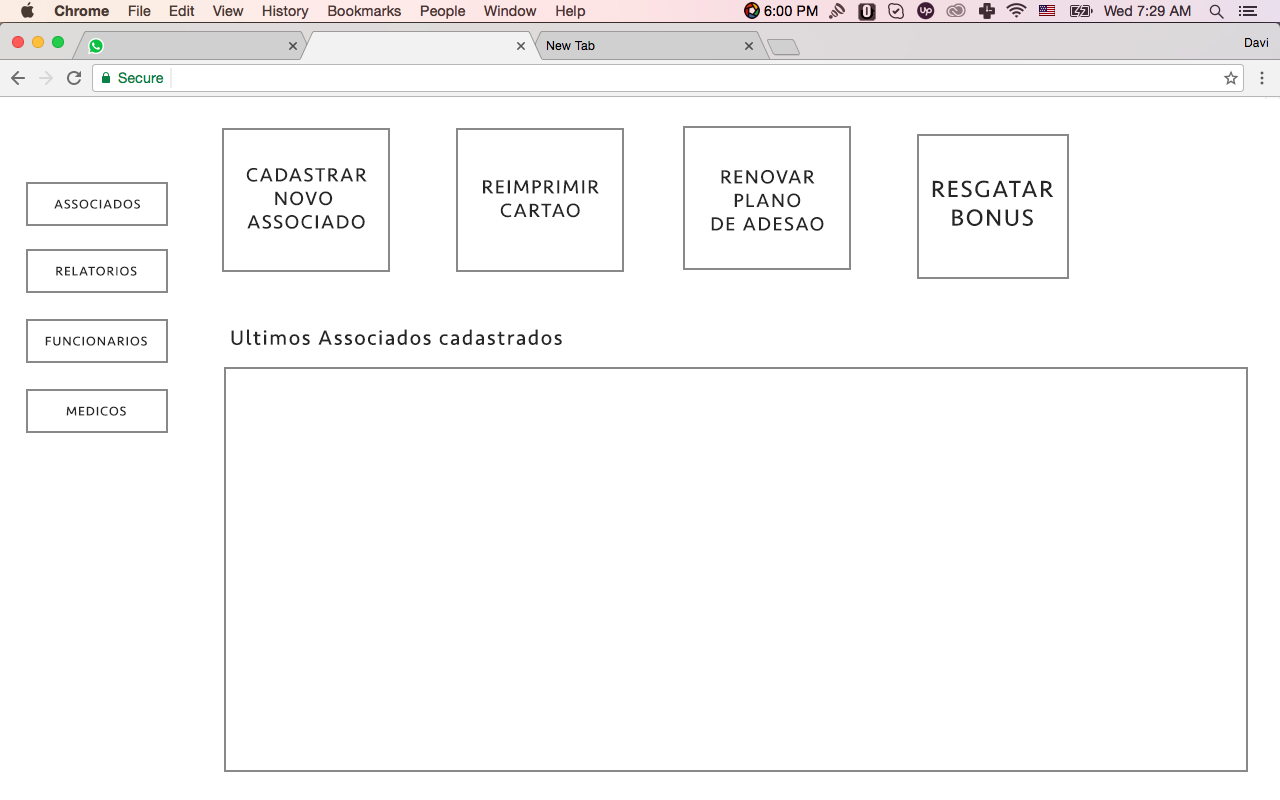
<style>
.page{position:relative;width:1280px;height:800px;background:#ffffff}
.page>*{position:absolute;margin:0}
.t1{font:19.6px "Seravek";letter-spacing:0.075em;color:#262626;text-transform:uppercase}
.t2{font:23.9px "Seravek";letter-spacing:0.075em;color:#262626;text-transform:uppercase}
.t3{font:12.9px "Seravek";letter-spacing:0.075em;color:#262626;text-transform:uppercase}
.t4{font:21.3px "Seravek";letter-spacing:0.075em;color:#262626}
</style>
<div class="page">
<p class="t1" style="left:246px;top:168px;width:121px;height:61px;text-align:center">Cadastrar<br>novo <br>associado</p>
<p class="t1" style="left:711px;top:170px;width:113px;height:61px;text-align:center">renovar<br>plano<br>de adesao</p>
<p class="t1" style="left:483px;top:180px;width:116px;height:38px;text-align:center">reimprimir<br>cartao</p>
<p class="t2" style="left:932px;top:180px;width:122px;height:46px;text-align:center">Resgatar<br>Bonus</p>
<p class="t3" style="left:54px;top:199px;width:86px;height:10px">Associados</p>
<p class="t3" style="left:56px;top:266px;width:81px;height:10px">Relatorios</p>
<p class="t4" style="left:231px;top:329px;width:331px;height:16px">Ultimos Associados cadastrados</p>
<p class="t3" style="left:45px;top:336px;width:102px;height:10px">funcionarios</p>
<p class="t3" style="left:66px;top:406px;width:60px;height:10px">Medicos</p>
</div>
